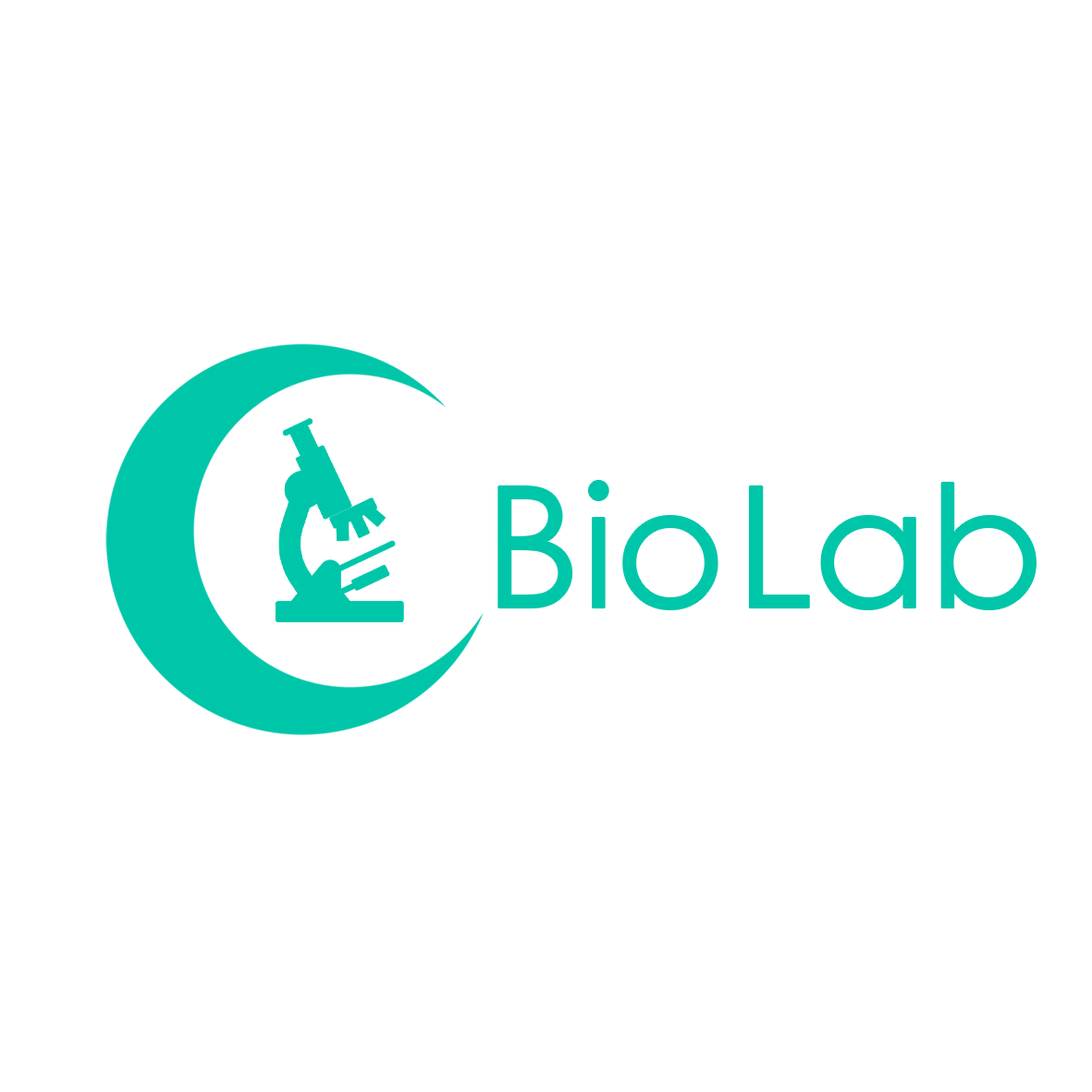
<style>
.page{position:relative;width:1092px;height:1092px;background:#ffffff}
.page>*{position:absolute;margin:0}
.t1{font:169.5px "CenturyGothic";color:#00c6a9}
</style>
<div class="page">
<p class="t1" style="left:498px;top:481px;width:538px;height:128px">Bio Lab</p>
</div>
